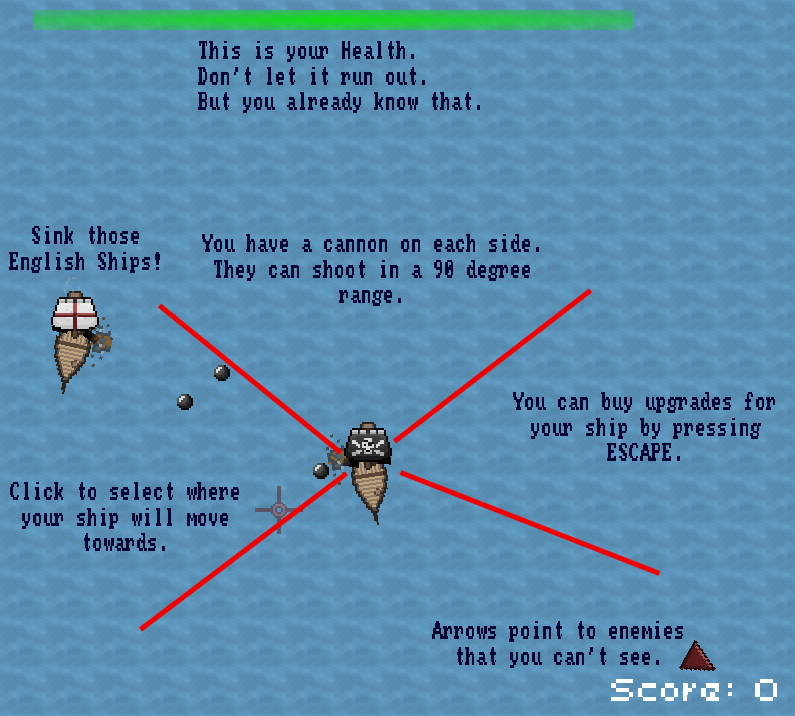
<style>
.page{position:relative;width:795px;height:716px}
.page>*{position:absolute;margin:0}
.t1{font:21.3px "November";color:#000631}
</style>
<div class="page">
<p class="t1" style="left:198px;top:41px;width:282px;height:72px">This is your Health.<br>Don’t let it run out.<br>But you already know that.</p>
<p class="t1" style="left:9px;top:226px;width:151px;height:47px;text-align:center">Sink those<br>English Ships!</p>
<p class="t1" style="left:202px;top:234px;width:337px;height:72px;text-align:center">You have a cannon on each side.<br>They can shoot in a 90 degree<br>range.</p>
<p class="t1" style="left:513px;top:392px;width:262px;height:69px;text-align:center">You can buy upgrades for<br>your ship by pressing<br>ESCAPE.</p>
<p class="t1" style="left:10px;top:482px;width:229px;height:69px;text-align:center">Click to select where<br>your ship will move<br>towards.</p>
<p class="t1" style="left:432px;top:621px;width:251px;height:47px;text-align:center">Arrows point to enemies<br>that you can’t see.</p>
</div>
